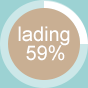
<style>
.page{position:relative;width:88px;height:88px;background:#c9af93}
.page>*{position:absolute;margin:0}
.t1{font:20px "ArialMT";color:#ffffff}
</style>
<div class="page">
<p class="t1" style="left:18px;top:26px;width:52px;height:20px">lading</p>
<p class="t1" style="left:26px;top:45px;width:39px;height:16px">59%</p>
</div>
